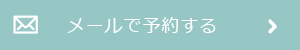
<style>
.page{position:relative;width:300px;height:50px;background:#96c7c4}
.page>*{position:absolute;margin:0}
.t1{font:18px "Meiryo";letter-spacing:0.05em;color:#ffffff}
</style>
<div class="page">
<p class="t1" style="left:67px;top:17px;width:149px;height:16px">メールで予約する</p>
</div>
